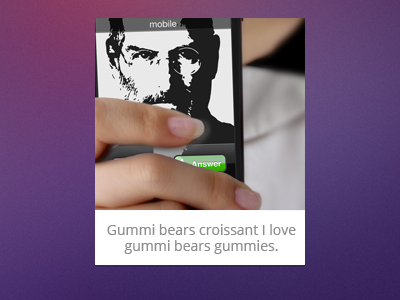
<style>
.page{position:relative;width:400px;height:300px}
.page>*{position:absolute;margin:0}
.t1{font:14px/16px "OpenSans";color:#8c8c8c}
</style>
<div class="page">
<p class="t1" style="left:107px;top:224px;width:189px;height:30px;text-align:center">Gummi bears croissant I love gummi bears gummies.</p>
</div>
